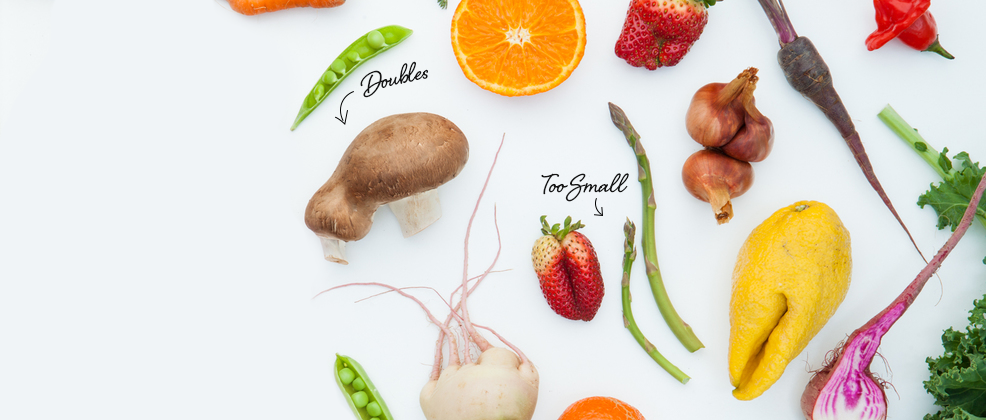
<style>
.page{position:relative;width:986px;height:420px;background:#f0f4f7}
.page>*{position:absolute;margin:0}
.t1{font:33.3px "Shelby";color:#151515}
</style>
<div class="page">
<p class="t1" style="left:360px;top:61px;width:68px;height:37px;rotate:-12deg">Doubles</p>
<p class="t1" style="left:541px;top:173px;width:88px;height:29px">Too Small</p>
</div>
